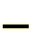
<style>
.page{position:relative;width:32px;height:32px;background:#ffffff}
.page>*{position:absolute;margin:0}
.t1{font:36px "Verdana-Bold";color:#000000}
</style>
<div class="page">
<p class="t1" style="left:2px;top:24px;width:27px;height:5px">_</p>
</div>
